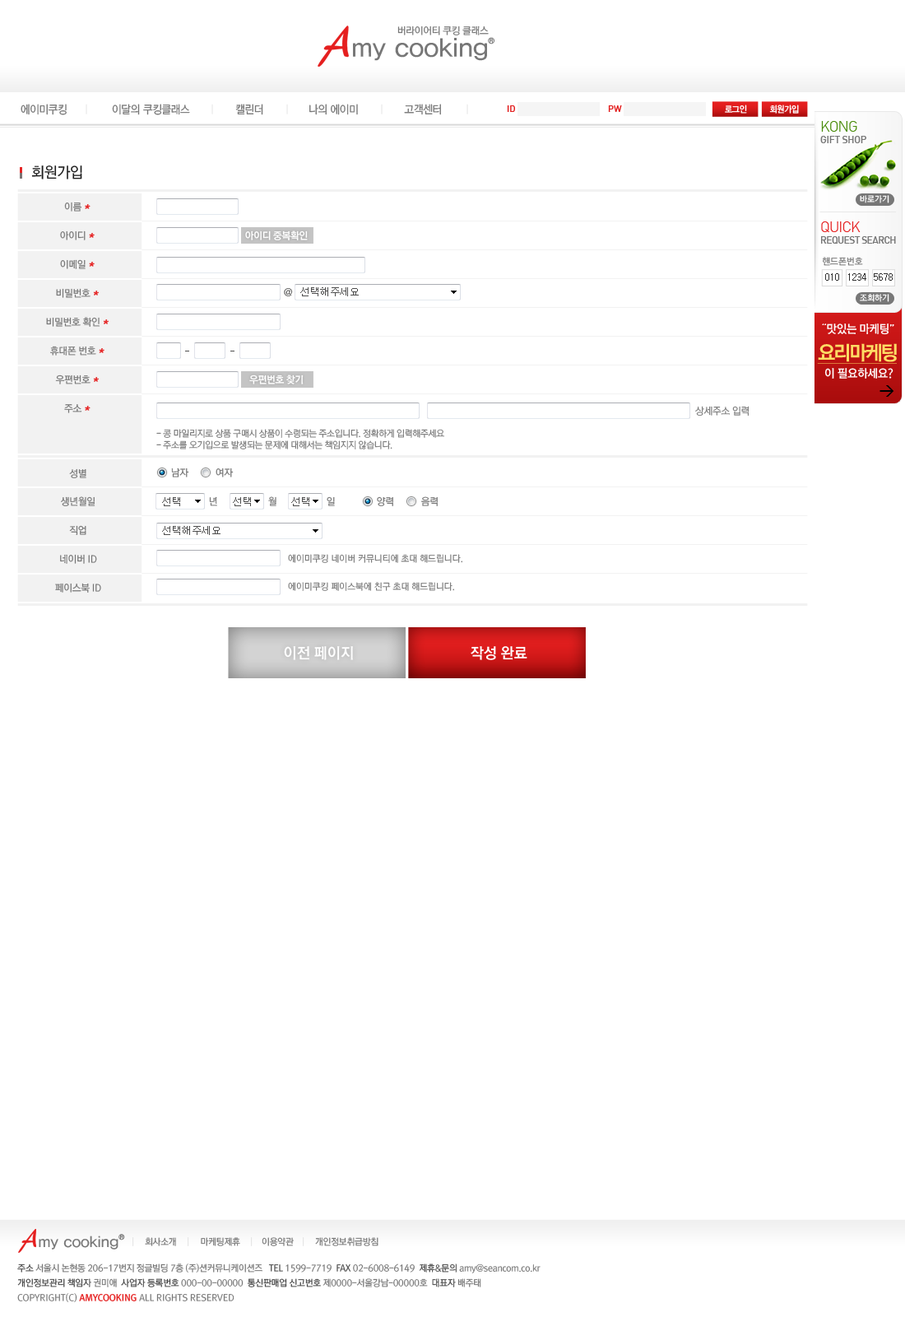
<style>
.page{position:relative;width:905px;height:1317px;background:#ffffff}
.page>*{position:absolute;margin:0}
.t1{font:9.9px "RixGoM";letter-spacing:-0.025em;color:#777777}
.t2{font:26px "YDIYGO330";color:#777777}
.t3{font:8.2px "Dotum";color:#777777}
.t4{font:11.5px "YDIYGO320";letter-spacing:-0.025em;color:#777777;scale:0.9 1}
.t5{font:9.1px "DINMMedium";color:#e21e1e;text-transform:uppercase}
.t6{font:9.1px "YDIYGO330";letter-spacing:-0.025em;color:#ffffff;scale:0.9 1}
.t7{font:9.9px "Dinmed";letter-spacing:-0.025em;color:#777777;text-transform:uppercase}
.t8{font:14.8px "Dinlig";letter-spacing:-0.05em;color:#488b08;text-transform:uppercase}
.t9{font:14.8px "RixGoM";letter-spacing:-0.025em;color:#1d1d1d;text-transform:uppercase}
.t10{font:8.2px "RixGoM";color:#fefefe;text-transform:uppercase}
.t11{font:9.9px "RixGoM";letter-spacing:-0.025em;color:#777777;text-transform:uppercase}
.t12{font:11.5px "RixGoM";letter-spacing:-0.025em;color:#e51f1f;text-transform:uppercase;font-weight:bold;font-style:italic}
.t13{font:9.9px "Dinmed";letter-spacing:-0.05em;color:#777777;text-transform:uppercase}
.t14{font:14.8px "Dinlig";letter-spacing:-0.05em;color:#e51f1f;text-transform:uppercase}
.t15{font:9.9px "RixGoB";letter-spacing:-0.025em;color:#ffffff;text-transform:uppercase}
.t16{font:9.1px "RixGoM";color:#7a7a7a;text-transform:uppercase}
.t17{font:9.9px "Dotum";color:#323232;text-transform:uppercase}
.t18{font:9.9px "RixGoM";color:#4d4d4d}
.t19{font:9.9px "Dotum";color:#4d4d4d}
.t20{font:11.5px "RixGoB";letter-spacing:-0.025em;color:#ffffff;text-transform:uppercase}
.t21{font:11.5px "DINMMedium";letter-spacing:-0.025em;color:#ffffff;text-transform:uppercase}
.t22{font:19.8px "RixGoEB";letter-spacing:-0.1em;color:#ffdc64;text-decoration:underline}
.t23{font:14.8px "DINMMedium";letter-spacing:-0.025em;color:#000000;text-transform:uppercase}
.t24{font:9.9px "RixGoL";letter-spacing:-0.025em;color:#777777;text-transform:uppercase}
.t25{font:9.1px/11.5px "RixGoL";letter-spacing:-0.025em;color:#777777;text-transform:uppercase}
.t26{font:9.1px "RixGoL";color:#777777}
.t27{font:14.8px "RixGoB";color:#ffffff;text-transform:uppercase}
.t28{font:15.3px "YDIYGO330";color:#777777}
.t29{font:7.4px "Dotum";color:#777777}
.t30{font:9.1px "RixGoM";letter-spacing:-0.025em;color:#e2e2e2}
.t31{font:9.1px "RixGoM";letter-spacing:-0.025em;color:#777777}
.t32{font:9.1px/14.8px "RixGoM";letter-spacing:-0.025em;color:#777777}
.t33{font:9.1px/14.8px "RixGoM";letter-spacing:-0.025em;color:#474747}
.t34{font:9.1px/14.8px "RixGoM";letter-spacing:-0.025em;color:#464646;text-transform:uppercase}
.t35{font:9.1px/14.8px "RixGoM";letter-spacing:-0.025em;color:#777777;text-transform:uppercase}
.t36{font:9.1px/14.8px "RixGoM";letter-spacing:-0.025em;color:#464646}
.t37{font:9.1px/14.8px "RixGoM";color:#777777;text-transform:uppercase}
.t38{font:9.1px/14.8px "RixGoB";color:#e51f1f;text-transform:uppercase}
</style>
<div class="page">
<p class="t1" style="left:398px;top:26px;width:91px;height:9px">버라이어티 쿠킹 클래스</p>
<p class="t2" style="left:353px;top:38px;width:134px;height:23px">my cooking</p>
<p class="t3" style="left:488px;top:37px;width:7px;height:7px">®</p>
<p class="t4" style="left:21px;top:104px;width:46px;height:11px">에이미쿠킹</p>
<p class="t4" style="left:112px;top:104px;width:78px;height:11px">이달의 쿠킹클래스</p>
<p class="t4" style="left:235px;top:104px;width:28px;height:11px">캘린더</p>
<p class="t4" style="left:309px;top:104px;width:49px;height:11px">나의 에이미</p>
<p class="t4" style="left:404px;top:104px;width:37px;height:11px">고객센터</p>
<p class="t5" style="left:507px;top:105px;width:8px;height:7px">ID</p>
<p class="t5" style="left:608px;top:105px;width:14px;height:7px">PW</p>
<p class="t6" style="left:725px;top:105px;width:22px;height:9px">로그인</p>
<p class="t6" style="left:770px;top:105px;width:29px;height:9px">회원가입</p>
<p class="t7" style="left:821px;top:121px;width:46px;height:22px"><span class="t8">KONG <br></span>GIFT SHOP</p>
<p class="t9" style="left:31px;top:165px;width:51px;height:14px">회원가입</p>
<p class="t10" style="left:860px;top:195px;width:30px;height:8px">바로가기</p>
<p class="t11" style="left:64px;top:202px;width:27px;height:10px">이름<span class="t12">＊</span></p>
<p class="t13" style="left:821px;top:221px;width:75px;height:23px"><span class="t14">QUICK <br></span>REQUEST search</p>
<p class="t11" style="left:60px;top:230px;width:35px;height:10px">아이디<span class="t12">＊</span></p>
<p class="t15" style="left:245px;top:230px;width:63px;height:10px">아이디 중복확인</p>
<p class="t16" style="left:822px;top:257px;width:41px;height:9px">핸드폰번호</p>
<p class="t11" style="left:60px;top:259px;width:35px;height:10px">이메일<span class="t12">＊</span></p>
<p class="t17" style="left:826px;top:273px;width:14px;height:8px">010</p>
<p class="t17" style="left:849px;top:273px;width:18px;height:8px">1234</p>
<p class="t17" style="left:874px;top:273px;width:19px;height:8px">5678</p>
<p class="t11" style="left:56px;top:288px;width:43px;height:10px">비밀번호<span class="t12">＊</span></p>
<p class="t18" style="left:284px;top:288px;width:9px;height:8px">@</p>
<p class="t19" style="left:300px;top:287px;width:59px;height:9px">선택해주세요</p>
<p class="t10" style="left:860px;top:294px;width:30px;height:8px">조회하기</p>
<p class="t11" style="left:46px;top:317px;width:63px;height:10px">비밀번호 확인<span class="t12">＊</span></p>
<p class="t20" style="left:822px;top:323px;width:73px;height:12px"><span class="t21">“</span>맛있는 마케팅<span class="t21">”</span></p>
<p class="t11" style="left:50px;top:346px;width:55px;height:10px">휴대폰 번호<span class="t12">＊</span></p>
<p class="t22" style="left:817px;top:343px;width:80px;height:21px">요리마케팅</p>
<p class="t11" style="left:55px;top:375px;width:44px;height:9px">우편번호<span class="t12">＊</span></p>
<p class="t15" style="left:249px;top:375px;width:55px;height:9px">우편번호 찾기</p>
<p class="t20" style="left:825px;top:368px;width:69px;height:11px">이 필요하세요?</p>
<p class="t23" style="left:880px;top:385px;width:15px;height:12px">&gt;</p>
<p class="t11" style="left:64px;top:404px;width:27px;height:9px">주소<span class="t12">＊</span></p>
<p class="t24" style="left:696px;top:406px;width:54px;height:10px">상세주소 입력</p>
<p class="t25" style="left:156px;top:429px;width:288px;height:20px">- 콩 마일리지로 상품 구매시 상품이 수령되는 주소입니다. 정확하게 입력해주세요<br>- 주소를 오기입으로 발생되는 문제에 대해서는 책임지지 않습니다.</p>
<p class="t11" style="left:69px;top:468px;width:17px;height:10px">성별</p>
<p class="t11" style="left:171px;top:468px;width:18px;height:9px">남자</p>
<p class="t11" style="left:216px;top:468px;width:18px;height:9px">여자</p>
<p class="t11" style="left:61px;top:496px;width:34px;height:10px">생년월일</p>
<p class="t19" style="left:162px;top:497px;width:18px;height:9px">선택</p>
<p class="t11" style="left:209px;top:496px;width:8px;height:10px">년</p>
<p class="t19" style="left:233px;top:497px;width:18px;height:9px">선택</p>
<p class="t11" style="left:268px;top:496px;width:9px;height:10px">월</p>
<p class="t19" style="left:291px;top:497px;width:18px;height:9px">선택</p>
<p class="t11" style="left:327px;top:496px;width:8px;height:10px">일</p>
<p class="t11" style="left:377px;top:496px;width:16px;height:10px">양력</p>
<p class="t11" style="left:421px;top:496px;width:17px;height:10px">음력</p>
<p class="t11" style="left:69px;top:525px;width:17px;height:10px">직업</p>
<p class="t19" style="left:162px;top:526px;width:59px;height:9px">선택해주세요</p>
<p class="t11" style="left:60px;top:554px;width:37px;height:10px">네이버 ID</p>
<p class="t26" style="left:288px;top:554px;width:175px;height:9px">에이미쿠킹 네이버 커뮤니티에 초대 해드립니다.</p>
<p class="t26" style="left:288px;top:582px;width:166px;height:9px">에이미쿠킹 페이스북에 친구 초대 해드립니다.</p>
<p class="t11" style="left:55px;top:583px;width:46px;height:10px">페이스북 ID</p>
<p class="t27" style="left:284px;top:646px;width:69px;height:14px">이전 페이지</p>
<p class="t27" style="left:471px;top:646px;width:57px;height:14px">작성 완료</p>
<p class="t28" style="left:39px;top:1235px;width:80px;height:14px">my cooking</p>
<p class="t29" style="left:119px;top:1234px;width:6px;height:6px">®</p>
<p class="t30" style="left:133px;top:1237px;width:1px;height:9px">|</p>
<p class="t31" style="left:145px;top:1237px;width:234px;height:9px">회사소개           마케팅제휴          이용약관          개인정보취급방침</p>
<p class="t30" style="left:188px;top:1237px;width:1px;height:9px">|</p>
<p class="t30" style="left:251px;top:1237px;width:2px;height:9px">|</p>
<p class="t30" style="left:303px;top:1237px;width:2px;height:9px">|</p>
<p class="t32" style="left:17px;top:1263px;width:524px;height:39px"><span class="t33">주소</span> 서울시 논현동 206-17번지 정글빌딩 7층 (주)션커뮤니케이션즈   <span class="t34">Tel</span><span class="t35"> 1599-7719  </span><span class="t34">Fax</span><span class="t35"> 02-6008-6149  </span><span class="t36">제휴&amp;문의</span> amy@seancom.co.kr<br><span class="t33">개인정보관리 책임자</span> 권미애  <span class="t36">사업자 등록번호</span> 000-00-00000  <span class="t36">통신판매업 신고번호</span> 제0000-서울강남-00000호  <span class="t36">대표자</span> 배주태<br><span class="t37">copyright(c) </span><span class="t38">amycooking</span><span class="t37"> all rights reserved</span></p>
</div>
